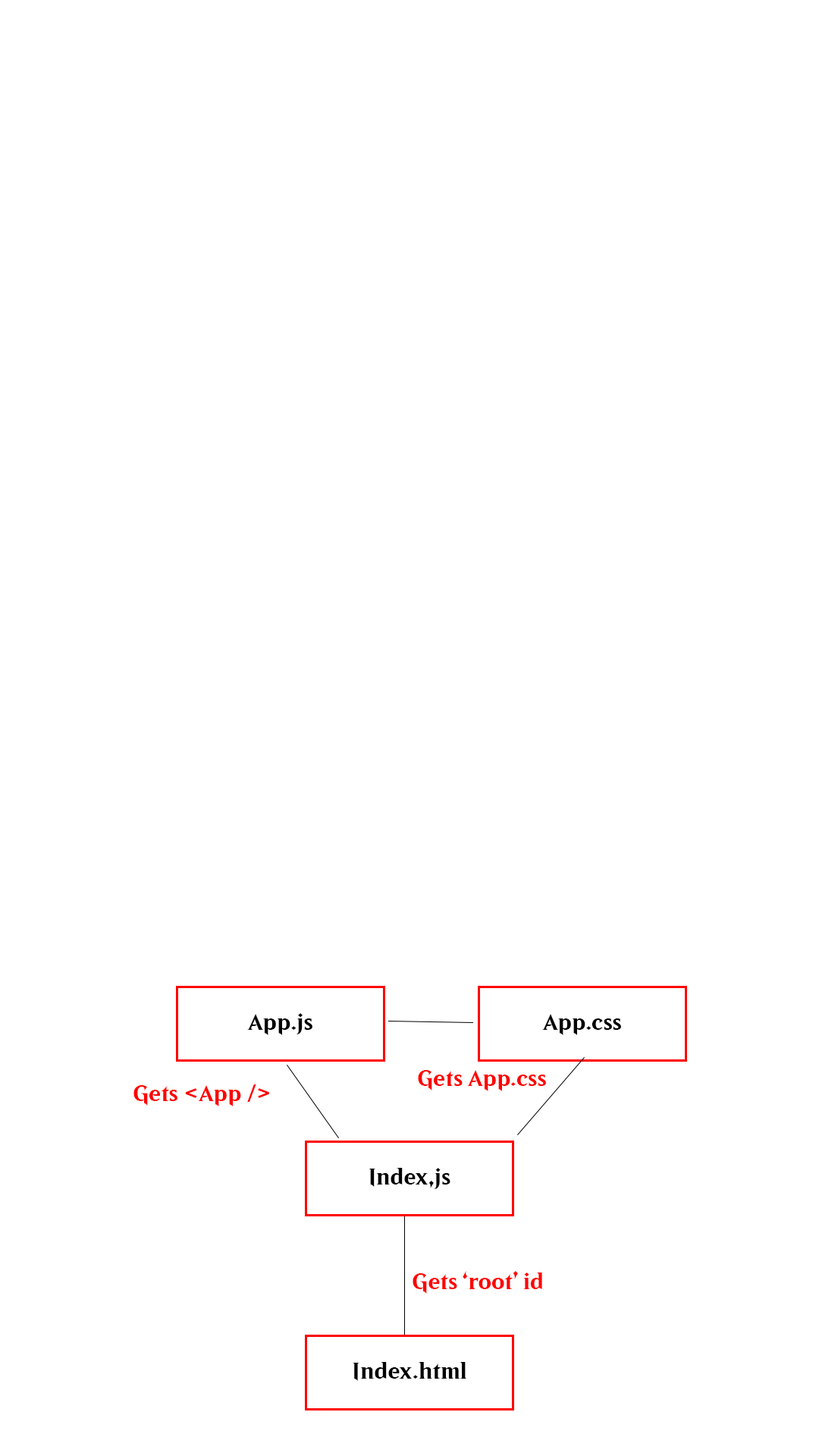
<style>
.page{position:relative;width:819px;height:1456px;background:#ffffff}
.page>*{position:absolute;margin:0}
.t1{font:22.8px "Beleren2016-Bold";color:#010000;scale:1.03 1}
.t2{font:22.8px "Beleren2016-Bold";color:#ff0202;scale:1.03 1}
.t3{font:22.8px "Beleren2016-Bold";color:#000000;scale:1.03 1}
</style>
<div class="page">
<p class="t1" style="left:247px;top:1013px;width:65px;height:22px">App.js</p>
<p class="t1" style="left:542px;top:1014px;width:79px;height:21px"><span class="t2"><br></span>App.css</p>
<p class="t2" style="left:418px;top:1070px;width:128px;height:21px">Gets App.css</p>
<p class="t2" style="left:133px;top:1084px;width:136px;height:22px">Gets &lt;App /&gt;</p>
<p class="t3" style="left:369px;top:1168px;width:81px;height:21px">Index,js</p>
<p class="t2" style="left:413px;top:1271px;width:129px;height:23px">Gets ‘root’ id</p>
<p class="t3" style="left:353px;top:1362px;width:114px;height:19px">Index.html</p>
</div>
